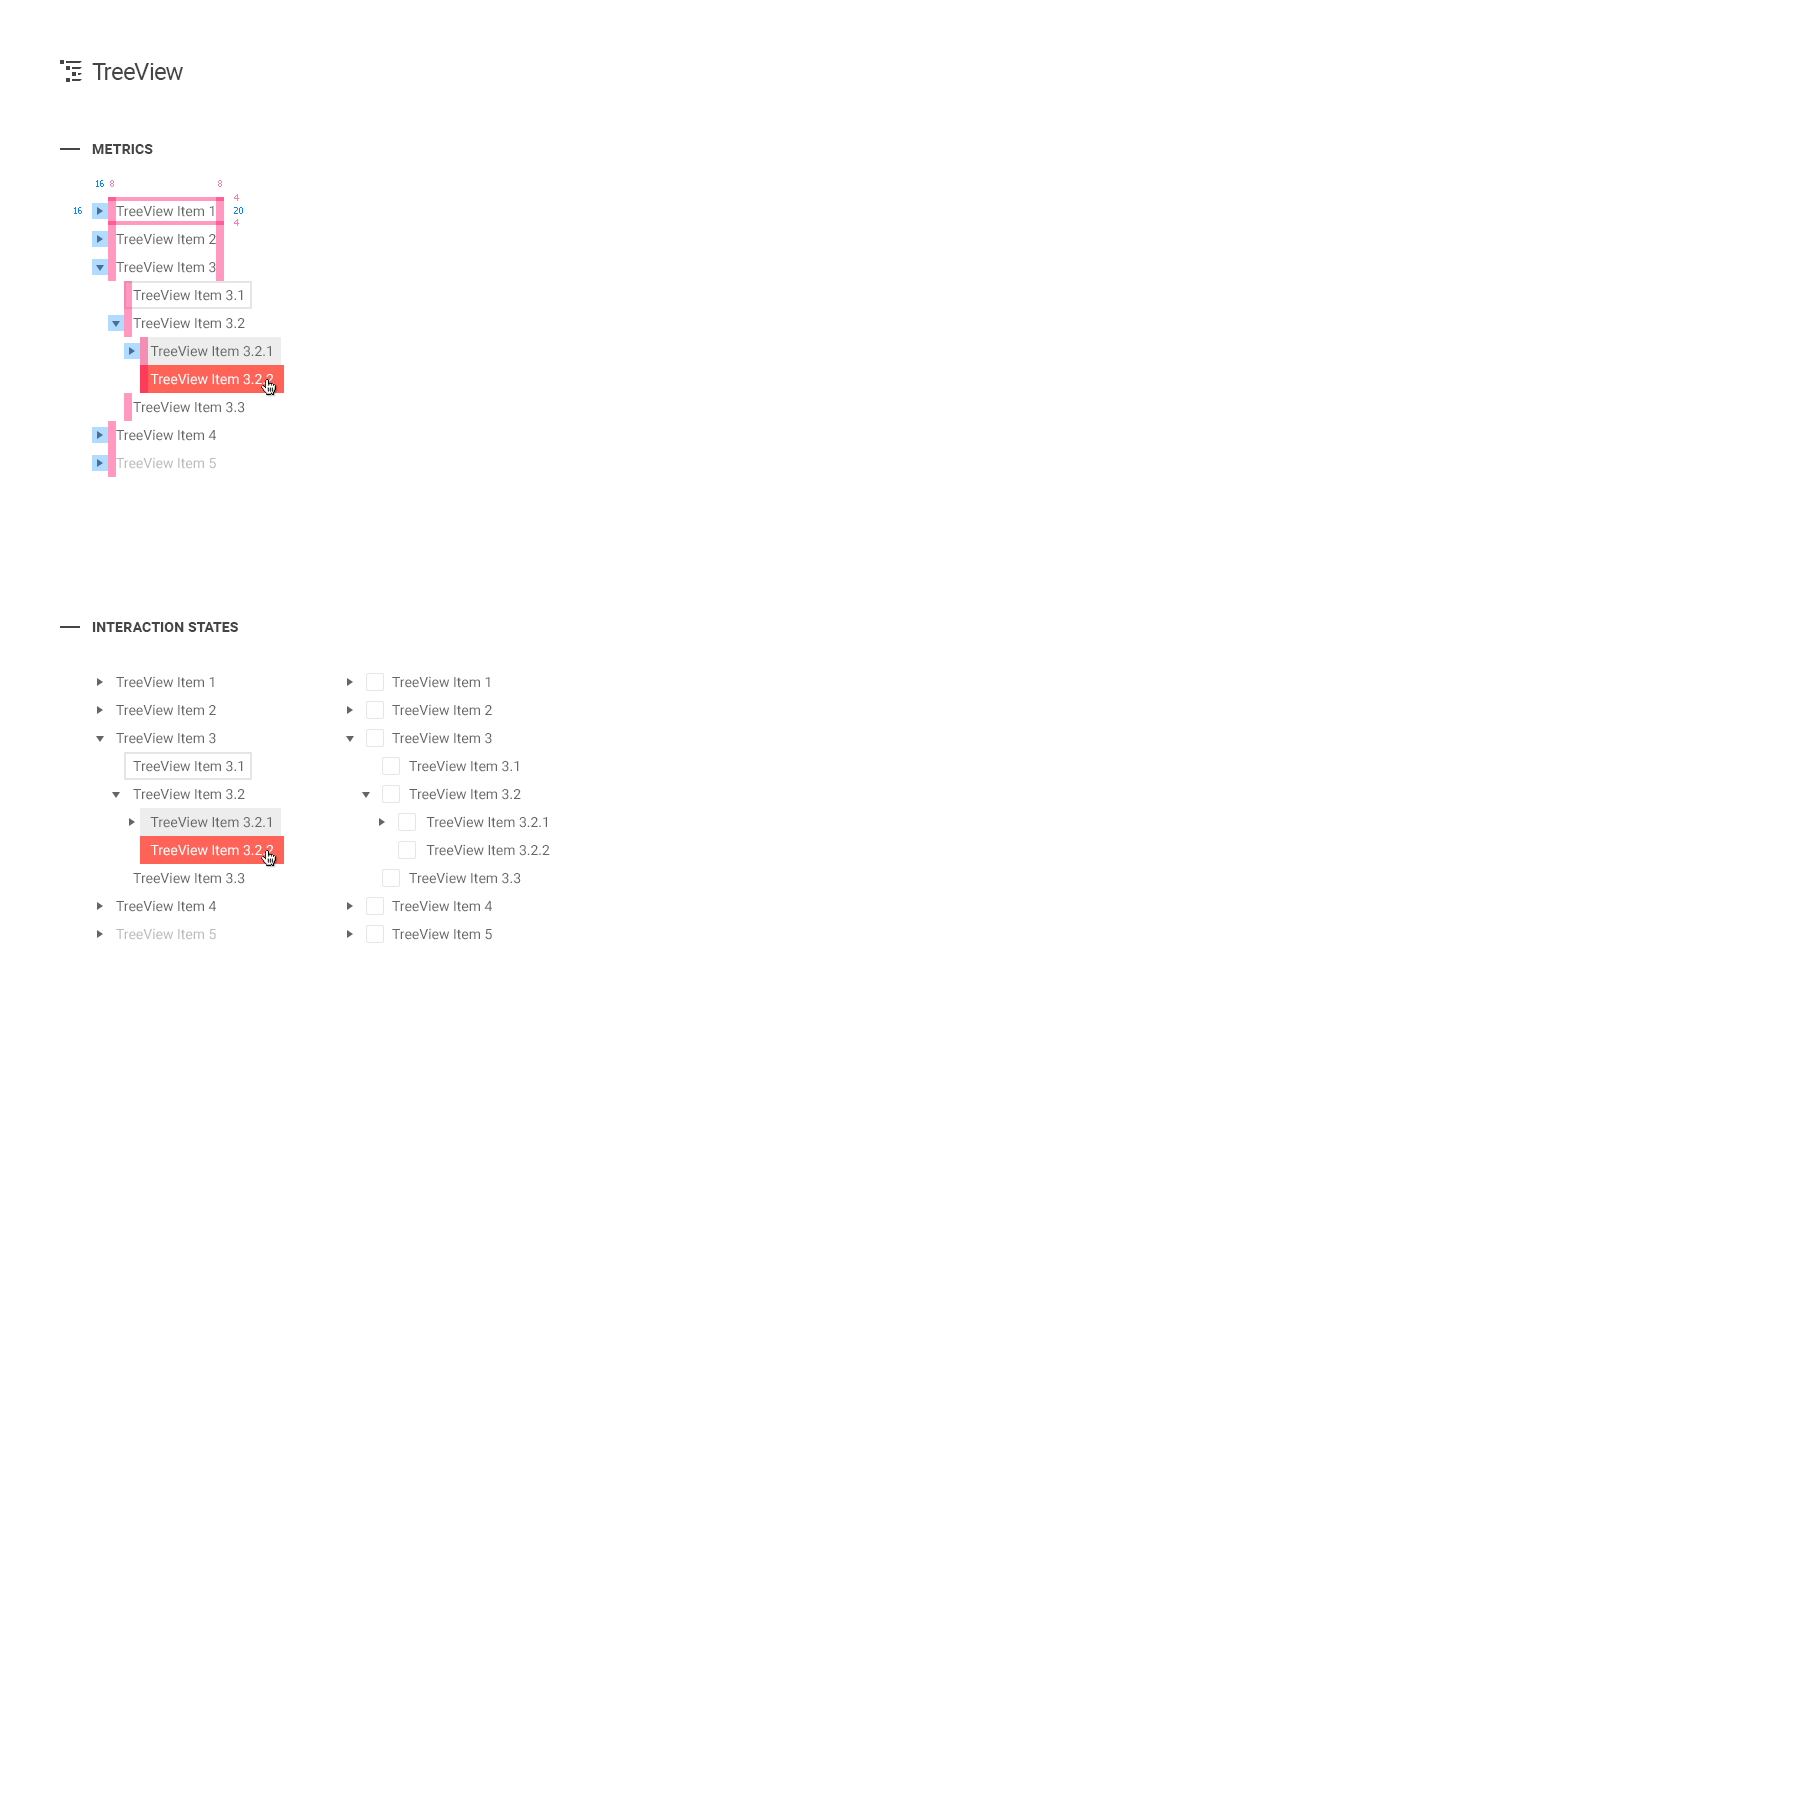
<style>
.page{position:relative;width:1800px;height:1800px;background:#ffffff}
.page>*{position:absolute;margin:0}
.t1{font:24px "Roboto-Regular";letter-spacing:-0.025em;color:#454545}
.t2{font:14px "Roboto-Bold";letter-spacing:0.01em;color:#454545;text-transform:uppercase}
.t3{font:9px "Tahoma";color:#008aff}
.t4{font:9px "Tahoma";color:#ff7cae}
.t5{font:14px/28px "Roboto-Regular";color:#656565}
.t6{font:14px/28px "Roboto-Regular";color:#ffffff}
.t7{font:14px/28px "Roboto-Regular";color:#bababa}
</style>
<div class="page">
<p class="t1" style="left:92px;top:63px;width:91px;height:17px">TreeView</p>
<p class="t2" style="left:92px;top:144px;width:61px;height:10px">Metrics</p>
<p class="t3" style="left:96px;top:180px;width:8px;height:7px">16</p>
<p class="t4" style="left:110px;top:180px;width:4px;height:7px">8</p>
<p class="t4" style="left:218px;top:180px;width:4px;height:7px">8</p>
<p class="t4" style="left:234px;top:194px;width:5px;height:7px">4</p>
<p class="t3" style="left:74px;top:207px;width:8px;height:7px">16</p>
<p class="t5" style="left:116px;top:205px;width:158px;height:264px">TreeView Item 1<br>TreeView Item 2<br>TreeView Item 3<br>     TreeView Item 3.1<br>     TreeView Item 3.2<br>          TreeView Item 3.2.1<br>          <span class="t6">TreeView Item 3.2.2<br></span>     TreeView Item 3.3<br>TreeView Item 4<br><span class="t7">TreeView Item 5</span></p>
<p class="t3" style="left:234px;top:207px;width:9px;height:7px">20</p>
<p class="t4" style="left:234px;top:219px;width:5px;height:7px">4</p>
<p class="t2" style="left:92px;top:622px;width:146px;height:10px">Interaction states</p>
<p class="t5" style="left:116px;top:676px;width:158px;height:264px">TreeView Item 1<br>TreeView Item 2<br>TreeView Item 3<br>     TreeView Item 3.1<br>     TreeView Item 3.2<br>          TreeView Item 3.2.1<br>          <span class="t6">TreeView Item 3.2.2<br></span>     TreeView Item 3.3<br>TreeView Item 4<br><span class="t7">TreeView Item 5</span></p>
<p class="t5" style="left:392px;top:676px;width:158px;height:264px">TreeView Item 1<br>TreeView Item 2<br>TreeView Item 3<br>     TreeView Item 3.1<br>     TreeView Item 3.2<br>          TreeView Item 3.2.1<br>          TreeView Item 3.2.2<br>     TreeView Item 3.3<br>TreeView Item 4<br>TreeView Item 5</p>
</div>
